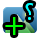
<style>
.page{position:relative;width:40px;height:40px;background:#ffffff}
.page>*{position:absolute;margin:0}
.t1{font:33.9px "MyriadArabic-Regular";color:#00ffff}
.t2{font:33.9px "MyriadPro-Regular";color:#00ff00}
</style>
<div class="page">
<p class="t1" style="left:25px;top:3px;width:9px;height:17px">؟</p>
<p class="t2" style="left:5px;top:17px;width:18px;height:18px">+</p>
</div>
